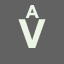
<style>
.page{position:relative;width:64px;height:64px;background:#626262}
.page>*{position:absolute;margin:0}
.t1{font:18px "Arial-BoldMT";color:#ebf5e5}
.t2{font:40px "Arial-BoldMT";color:#ebf5e5}
</style>
<div class="page">
<p class="t1" style="left:25px;top:5px;width:14px;height:13px">A</p>
<p class="t2" style="left:18px;top:19px;width:28px;height:29px">V</p>
</div>
